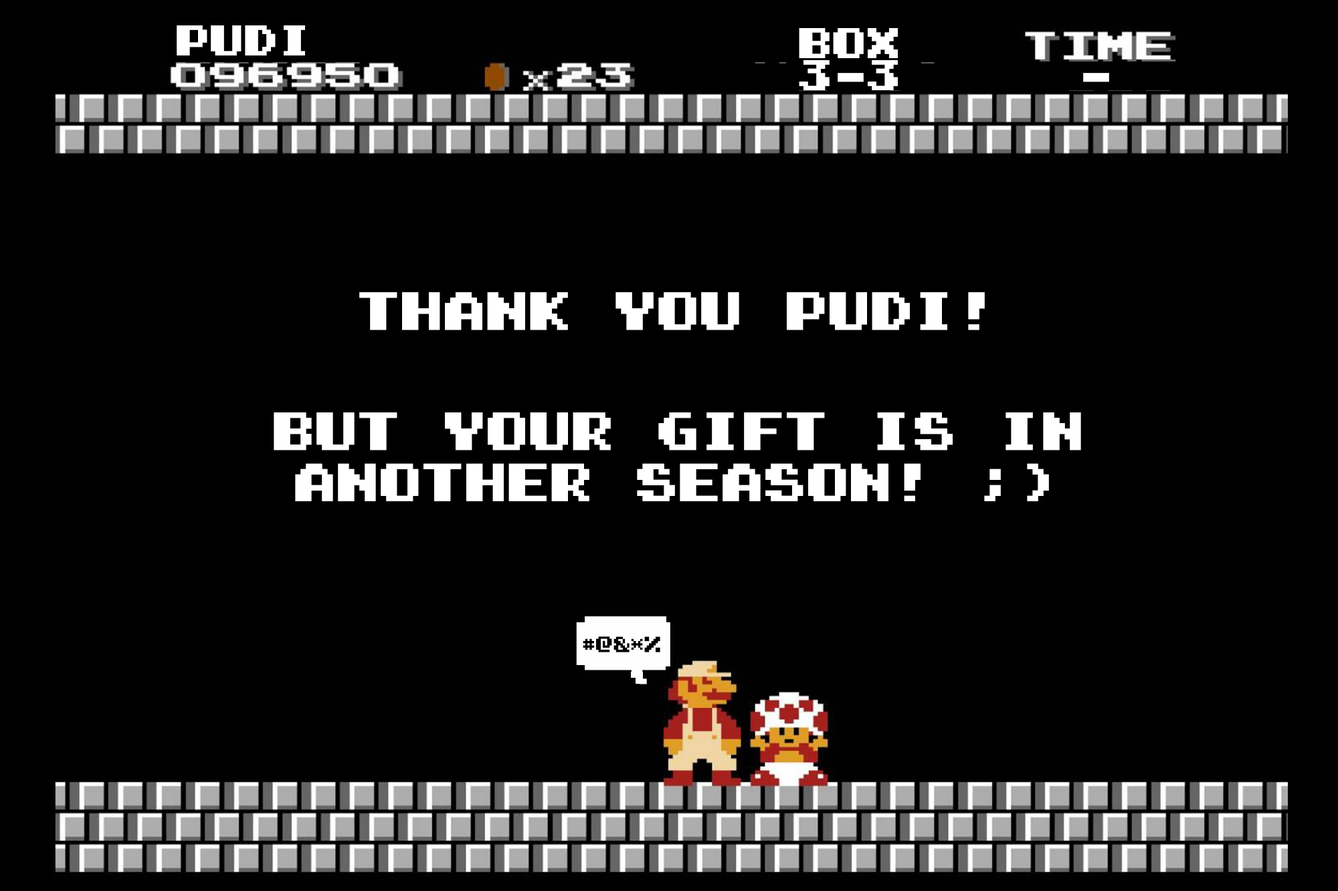
<style>
.page{position:relative;width:1338px;height:891px;background:#010101}
.page>*{position:absolute;margin:0}
.t1{font:34.2px "Super-Mario-Bros.-2";color:#ffffff}
.t2{font:42.7px "Super-Mario-Bros.-2";color:#ffffff}
</style>
<div class="page">
<p class="t1" style="left:177px;top:25px;width:128px;height:31px">PUDI</p>
<p class="t1" style="left:799px;top:28px;width:99px;height:30px">BOX</p>
<p class="t1" style="left:799px;top:60px;width:99px;height:30px">3-3</p>
<p class="t1" style="left:1083px;top:73px;width:26px;height:9px">-</p>
<p class="t2" style="left:359px;top:292px;width:625px;height:38px">THANK YOU PUDI!</p>
<p class="t2" style="left:274px;top:413px;width:807px;height:89px;text-align:center">but your gift is in another season! ;)</p>
</div>
